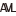
<style>
.page{position:relative;width:16px;height:16px;background:#ffffff}
.page>*{position:absolute;margin:0}
.t1{font:12px "Tahoma";color:#291f1e}
</style>
<div class="page">
<p class="t1" style="left:0px;top:3px;width:8px;height:9px">A</p>
<p class="t1" style="left:4px;top:3px;width:9px;height:9px">V</p>
<p class="t1" style="left:11px;top:3px;width:6px;height:9px">L</p>
</div>
